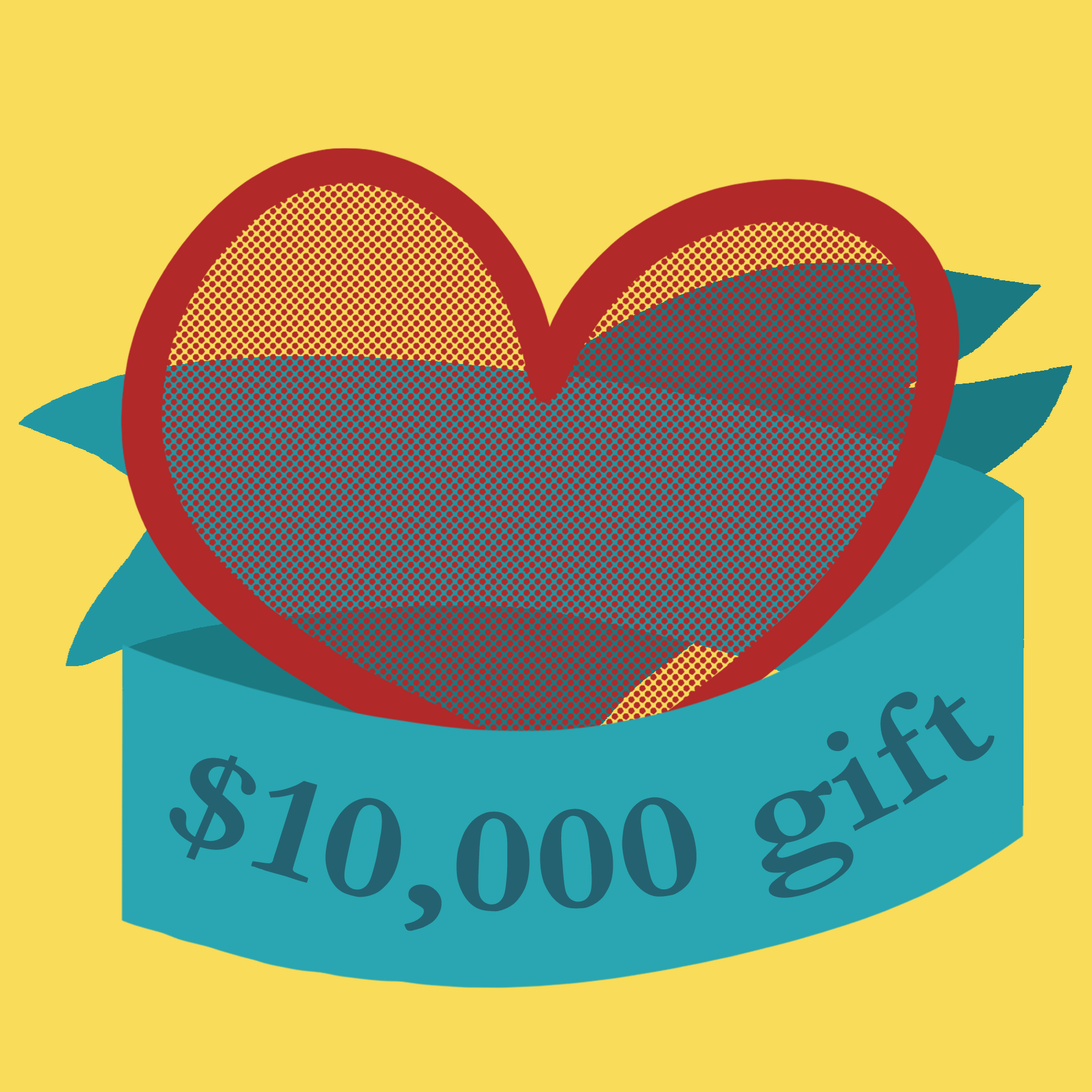
<style>
.page{position:relative;width:1092px;height:1092px;background:#f8dc5a}
.page>*{position:absolute;margin:0}
.t1{font:151.7px "Garamond-Bold";color:#246271}
</style>
<div class="page">
<p class="t1" style="left:169px;top:692px;width:825px;height:239px;rotate:-6deg">$10,000 gift</p>
</div>
